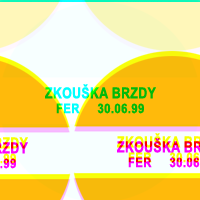
<style>
.page{position:relative;width:200px;height:200px;background:#f7ffff}
.page>*{position:absolute;margin:0}
.t1{font:15px "Arial-BoldMT";letter-spacing:0.01em;font-weight:bold;scale:0.81 1}
.t2{font:13.2px "Arial-BoldMT";letter-spacing:0.01em;font-weight:bold;scale:0.86 1}
</style>
<div class="page">
<p class="t1" style="left:45px;top:82px;width:111px;height:15px">ZKOUŠKA BRZDY</p>
<p class="t2" style="left:56px;top:101px;width:88px;height:11px">FER     30.06.99</p>
</div>
